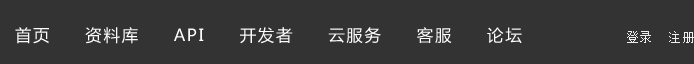
<style>
.page{position:relative;width:694px;height:64px;background:#333333}
.page>*{position:absolute;margin:0}
.t1{font:16.5px "MicrosoftYaHei";letter-spacing:0.1em;color:#ffffff}
.t2{font:12.4px "SimSun";letter-spacing:0.1em;color:#eeeeee}
</style>
<div class="page">
<p class="t1" style="left:15px;top:27px;width:507px;height:17px">首页     资料库     API     开发者     云服务     客服     论坛</p>
<p class="t2" style="left:627px;top:31px;width:67px;height:12px">登录  注册</p>
</div>
